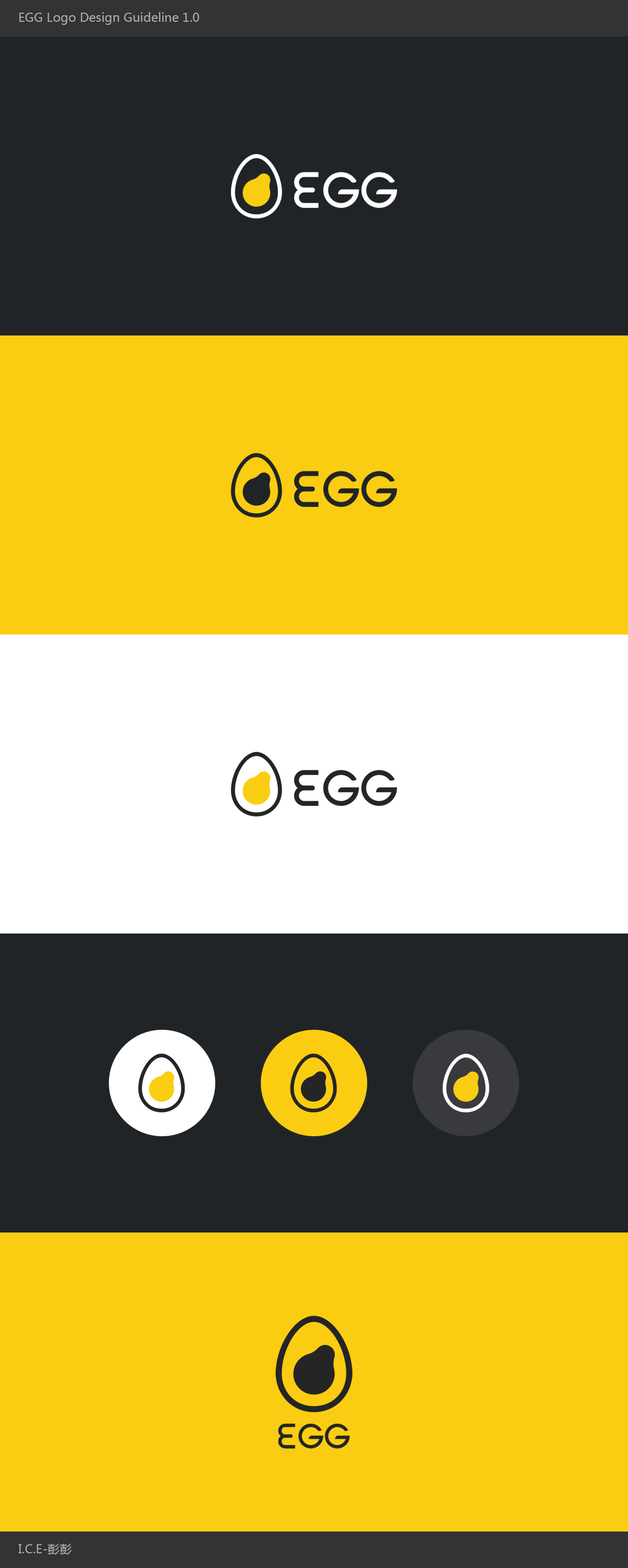
<style>
.page{position:relative;width:628px;height:1568px;background:#facd12}
.page>*{position:absolute;margin:0}
.t1{font:12.2px "MicrosoftYaHei";color:#adadae}
</style>
<div class="page">
<p class="t1" style="left:19px;top:12px;width:180px;height:13px">EGG Logo Design Guideline 1.0</p>
<p class="t1" style="left:18px;top:1544px;width:54px;height:11px">I.C.E-彭彭</p>
</div>
